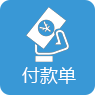
<style>
.page{position:relative;width:95px;height:95px;background:#3998d6}
.page>*{position:absolute;margin:0}
.t1{font:18px "MicrosoftYaHei";color:#ffffff}
</style>
<div class="page">
<p class="t1" style="left:22px;top:67px;width:54px;height:17px">付款单</p>
</div>
